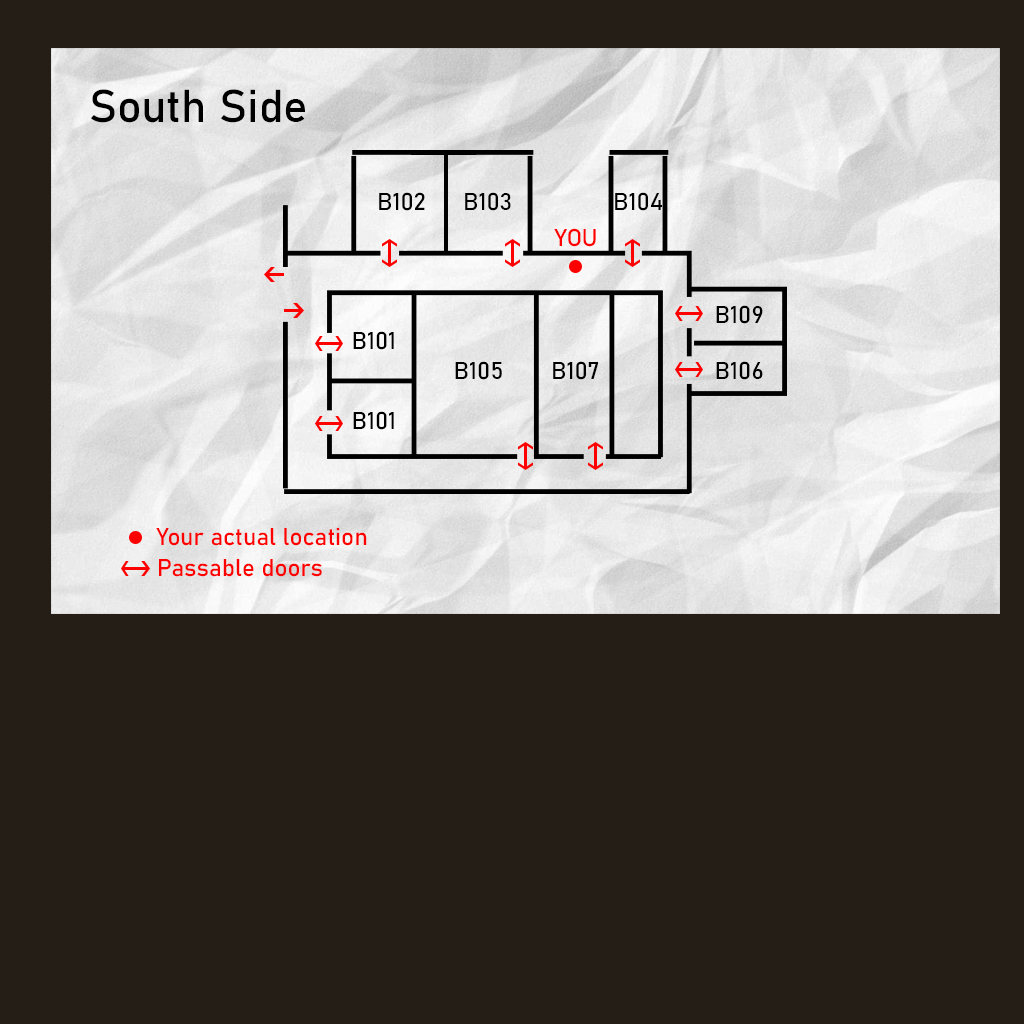
<style>
.page{position:relative;width:1024px;height:1024px;background:#241e16}
.page>*{position:absolute;margin:0}
.t1{font:45.6px "Bahnschrift";color:#000000}
.t2{font:24px "Bahnschrift";color:#000000}
.t3{font:24px "Bahnschrift";color:#ff0000}
.t4{font:24.1px "Bahnschrift";color:#ff0000}
</style>
<div class="page">
<p class="t1" style="left:91px;top:89px;width:214px;height:34px">South Side</p>
<p class="t2" style="left:379px;top:192px;width:46px;height:19px">B102</p>
<p class="t2" style="left:465px;top:192px;width:46px;height:19px">B103</p>
<p class="t2" style="left:615px;top:192px;width:47px;height:19px">B104</p>
<p class="t3" style="left:554px;top:228px;width:42px;height:19px">YOU</p>
<p class="t2" style="left:716px;top:305px;width:47px;height:19px">B109</p>
<p class="t2" style="left:353px;top:331px;width:41px;height:19px">B101</p>
<p class="t2" style="left:455px;top:361px;width:47px;height:19px">B105</p>
<p class="t2" style="left:553px;top:361px;width:46px;height:19px">B107</p>
<p class="t2" style="left:716px;top:361px;width:47px;height:19px">B106</p>
<p class="t2" style="left:353px;top:411px;width:41px;height:19px">B101</p>
<p class="t4" style="left:156px;top:528px;width:211px;height:18px">Your actual location</p>
<p class="t4" style="left:159px;top:559px;width:163px;height:18px">Passable doors</p>
</div>
